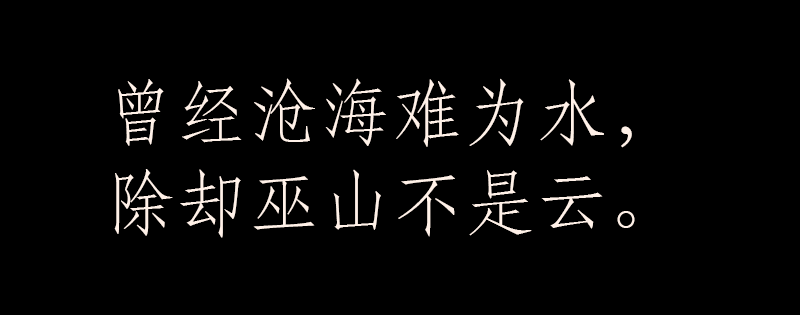
<style>
.page{position:relative;width:800px;height:315px;background:#000000}
.page>*{position:absolute;margin:0}
.t1{font:72px/90px "STFangsong";color:#fff1e8}
</style>
<div class="page">
<p class="t1" style="left:114px;top:78px;width:521px;height:160px;text-align:center">曾经沧海难为水，<br>除却巫山不是云。</p>
</div>
